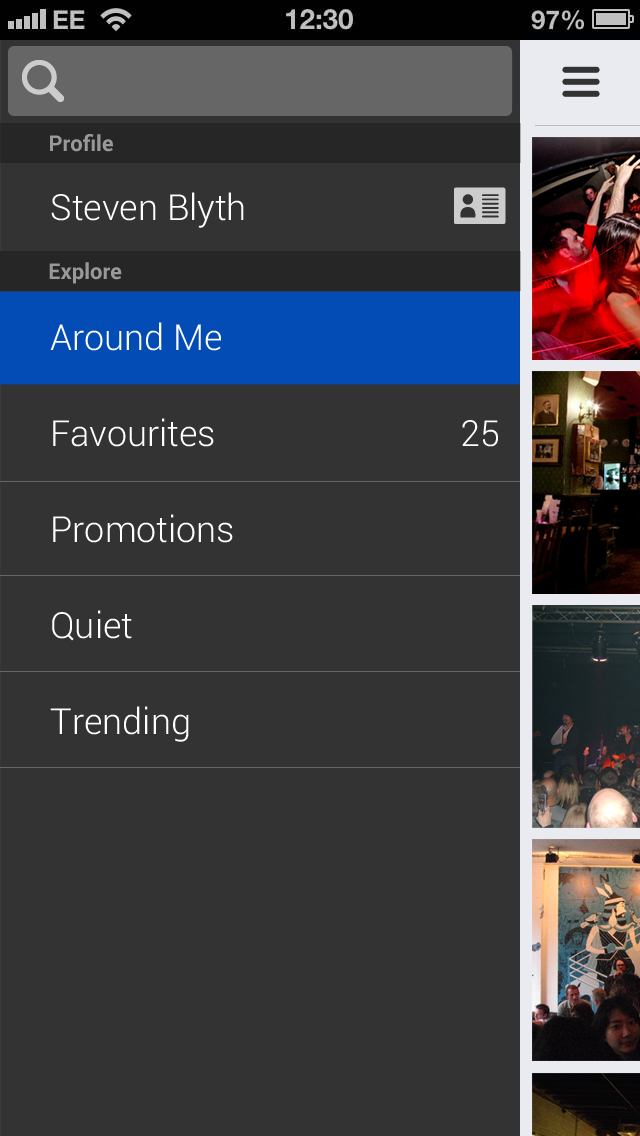
<style>
.page{position:relative;width:640px;height:1136px;background:#333333}
.page>*{position:absolute;margin:0}
.t1{font:22px "Roboto-Bold";color:#999999}
.t2{font:36px "Roboto-Light";color:#ffffff}
</style>
<div class="page">
<p class="t1" style="left:50px;top:134px;width:63px;height:18px">Profile</p>
<p class="t2" style="left:51px;top:192px;width:193px;height:36px">Steven Blyth</p>
<p class="t1" style="left:49px;top:262px;width:73px;height:22px">Explore</p>
<p class="t2" style="left:50px;top:322px;width:171px;height:29px">Around Me</p>
<p class="t2" style="left:53px;top:418px;width:161px;height:29px">Favourites</p>
<p class="t2" style="left:462px;top:420px;width:36px;height:27px">25</p>
<p class="t2" style="left:53px;top:514px;width:180px;height:29px">Promotions</p>
<p class="t2" style="left:52px;top:610px;width:80px;height:31px">Quiet</p>
<p class="t2" style="left:50px;top:706px;width:139px;height:36px">Trending</p>
</div>
